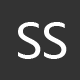
<style>
.page{position:relative;width:80px;height:80px;background:#333333}
.page>*{position:absolute;margin:0}
.t1{font:48px "MicrosoftYaHei";letter-spacing:-0.035em;color:#ffffff}
</style>
<div class="page">
<p class="t1" style="left:18px;top:22px;width:49px;height:37px">SS</p>
</div>
